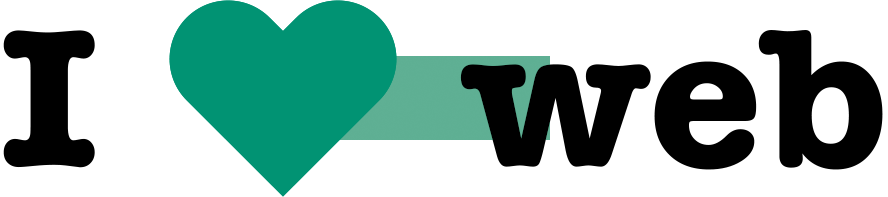
<style>
.page{position:relative;width:888px;height:197px;background:#ffffff}
.page>*{position:absolute;margin:0}
.t1{font:202.1px "AmericanTypewriter-Bold";color:#000000;scale:1.03 1}
</style>
<div class="page">
<p class="t1" style="left:3px;top:30px;width:880px;height:140px">I       web</p>
</div>
